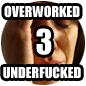
<style>
.page{position:relative;width:86px;height:86px;background:#ffffff}
.page>*{position:absolute;margin:0}
.t1{font:14px "Impact";color:#ffffff}
.t2{font:32px "Impact";color:#ffffff}
</style>
<div class="page">
<p class="t1" style="left:4px;top:5px;width:76px;height:13px">OVERWORKED</p>
<p class="t2" style="left:36px;top:28px;width:16px;height:27px">3</p>
<p class="t1" style="left:3px;top:66px;width:78px;height:13px">UNDERFUCKED</p>
</div>
